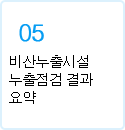
<style>
.page{position:relative;width:125px;height:130px;background:#ffffff}
.page>*{position:absolute;margin:0}
.t1{font:24px "Dotum";letter-spacing:-0.1em;color:#079df3;font-weight:bold}
.t2{font:14.7px/18px "Dotum";letter-spacing:-0.1em;color:#000000}
</style>
<div class="page">
<p class="t1" style="left:19px;top:24px;width:25px;height:18px">05</p>
<p class="t2" style="left:9px;top:55px;width:84px;height:49px">비산누출시설<br>누출점검 결과<br>요약</p>
</div>
